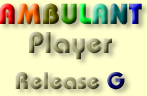
<style>
.page{position:relative;width:147px;height:96px;background:#ffffcc}
.page>*{position:absolute;margin:0}
.t1{font:29px "Bauhaus-Heavy"}
.t2{font:30px "Bauhaus-Bold"}
.t3{font:24px "Bauhaus-Bold"}
</style>
<div class="page">
<p class="t1" style="left:0px;top:3px;width:142px;height:22px">AMBULANT</p>
<p class="t2" style="left:29px;top:31px;width:83px;height:29px">Player</p>
<p class="t3" style="left:15px;top:72px;width:110px;height:18px">Release G</p>
</div>
